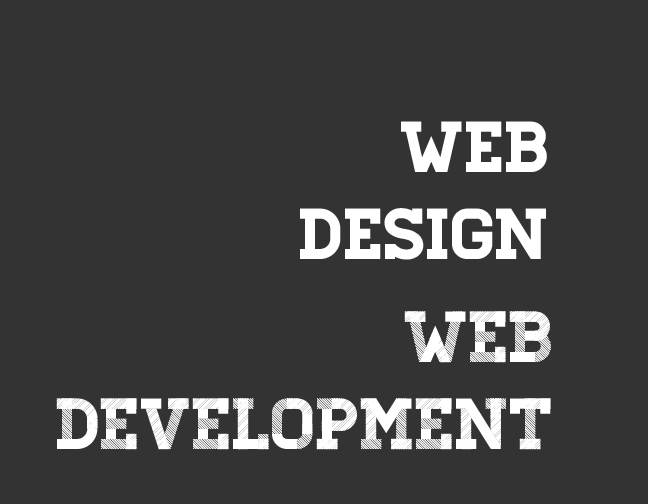
<style>
.page{position:relative;width:648px;height:504px;background:#333333}
.page>*{position:absolute;margin:0}
.t1{font:72px "Homestead-Regular";color:#ffffff}
.t2{font:72px "Homestead-Two";color:#ffffff}
.t3{font:72px "Homestead-One";color:#ffffff}
.t4{font:72px "Homestead-Three";color:#ffffff}
</style>
<div class="page">
<p class="t1" style="left:300px;top:121px;width:247px;height:139px;text-align:right">Web<br>Design</p>
<p class="t2" style="left:56px;top:311px;width:495px;height:139px;text-align:right">Web <br>Development</p>
<p class="t3" style="left:57px;top:311px;width:494px;height:138px;text-align:right">Web <br>Development</p>
<p class="t4" style="left:62px;top:311px;width:489px;height:138px;text-align:right">Web <br>Development</p>
<p class="t4" style="left:62px;top:311px;width:489px;height:138px;text-align:right">Web <br>Development</p>
</div>
